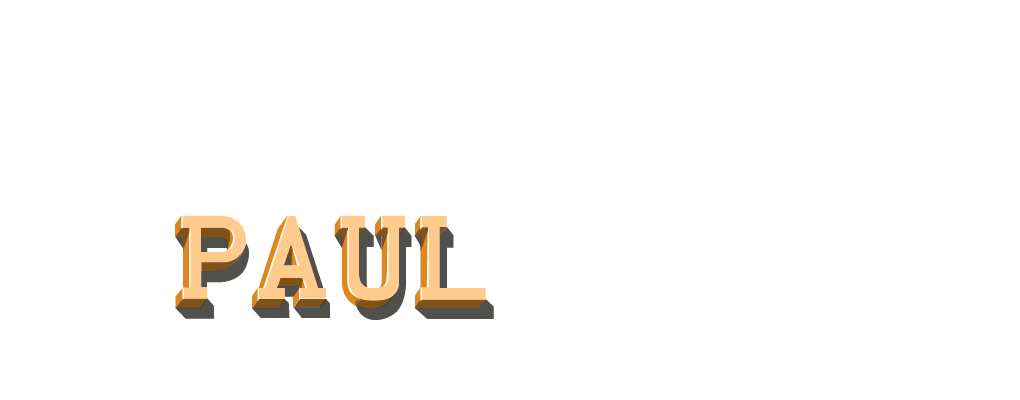
<style>
.page{position:relative;width:1020px;height:400px;background:#ffffff}
.page>*{position:absolute;margin:0}
.t1{font:125px "Monstre-Midtone"}
.t2{font:125px "Monstre-Regular";color:#fecb8c}
.t3{font:125px "Monstre-CoreShadow";color:#80521b}
.t4{font:125px "Monstre-CastShadow";color:#51504d}
</style>
<div class="page">
<p class="t1" style="left:175px;top:216px;width:253px;height:93px">paul</p>
<p class="t2" style="left:181px;top:215px;width:305px;height:86px">paul</p>
<p class="t3" style="left:175px;top:227px;width:311px;height:82px">paul</p>
<p class="t4" style="left:175px;top:227px;width:319px;height:93px">paul</p>
</div>
